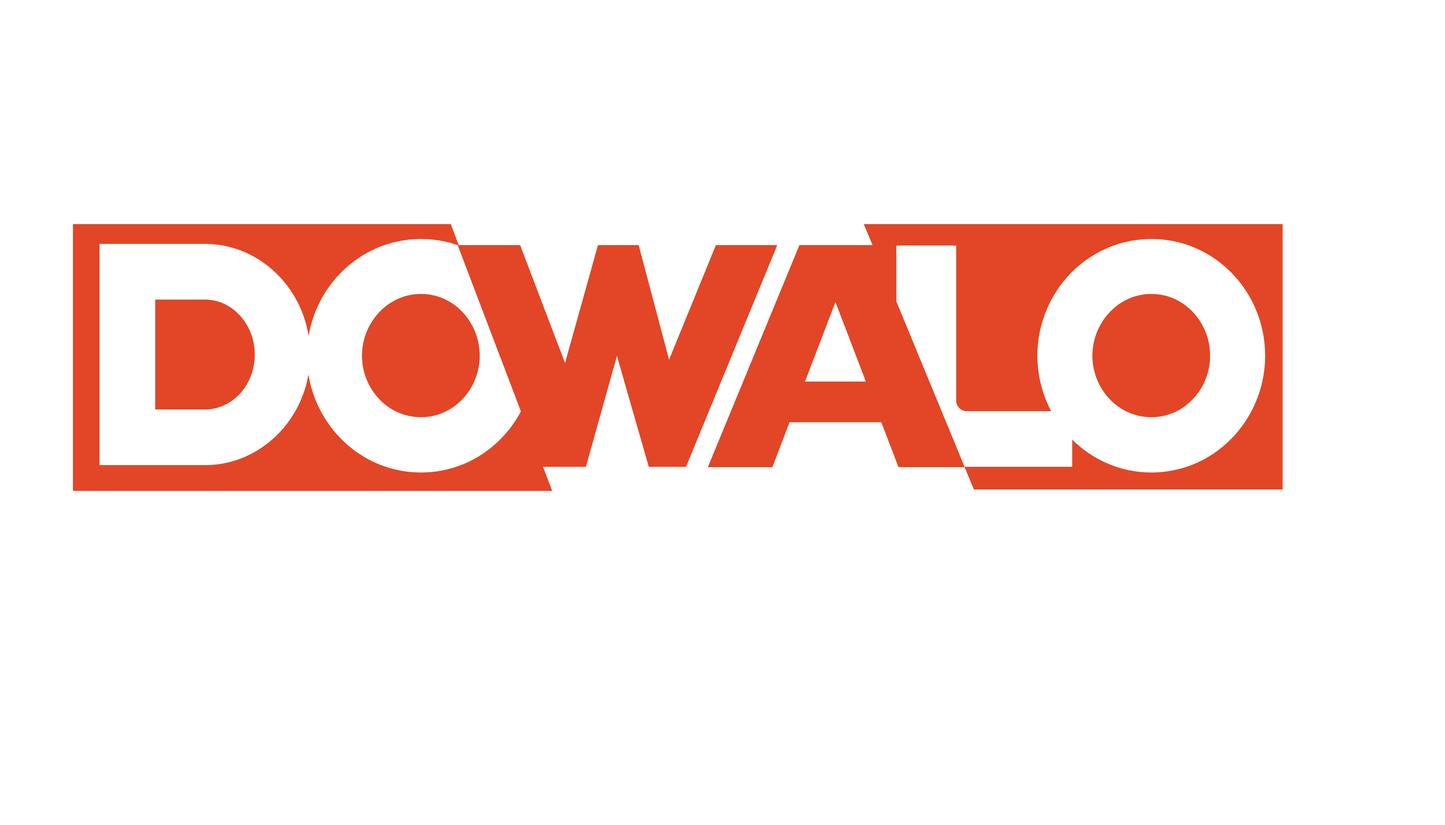
<style>
.page{position:relative;width:1445px;height:825px;background:#ffffff}
.page>*{position:absolute;margin:0}
.t1{font:349.6px "SpinCycleOT";letter-spacing:-0.06em;color:#ffffff}
</style>
<div class="page">
<p class="t1" style="left:99px;top:244px;width:211px;height:221px">D</p>
<p class="t1" style="left:307px;top:239px;width:228px;height:234px">O</p>
<p class="t1" style="left:896px;top:246px;width:172px;height:221px">L</p>
<p class="t1" style="left:900px;top:246px;width:172px;height:221px">L</p>
<p class="t1" style="left:1037px;top:239px;width:228px;height:234px">O</p>
</div>
